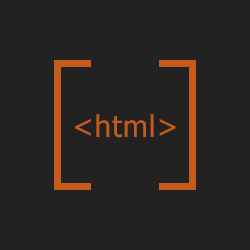
<style>
.page{position:relative;width:250px;height:250px;background:#222222}
.page>*{position:absolute;margin:0}
.t1{font:30px "Tahoma";letter-spacing:0.025em;color:#c55c1d}
</style>
<div class="page">
<p class="t1" style="left:75px;top:114px;width:101px;height:24px">&lt;html&gt;</p>
</div>
